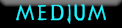
<style>
.page{position:relative;width:122px;height:28px;background:#000000}
.page>*{position:absolute;margin:0}
.t1{font:24.4px "RWBY_Style";letter-spacing:0.14em;color:#1ef2ff;scale:1.08 1}
</style>
<div class="page">
<p class="t1" style="left:16px;top:4px;width:90px;height:20px">medium</p>
</div>
